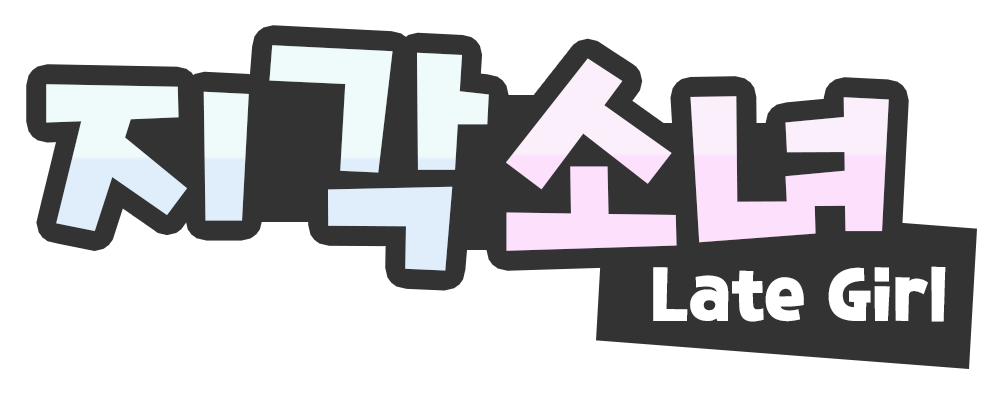
<style>
.page{position:relative;width:1000px;height:400px;background:#ffffff}
.page>*{position:absolute;margin:0}
.t1{font:250px "TTManwhagageR";color:#effbfb}
.t2{font:250px "TTManwhagageR";color:#fce0fc}
.t3{font:80px "TTManwhagageR";color:#ffffff}
</style>
<div class="page">
<p class="t1" style="left:46px;top:45px;width:443px;height:226px">지각</p>
<p class="t2" style="left:506px;top:58px;width:383px;height:193px">소녀</p>
<p class="t3" style="left:653px;top:266px;width:293px;height:56px">Late Girl</p>
</div>
